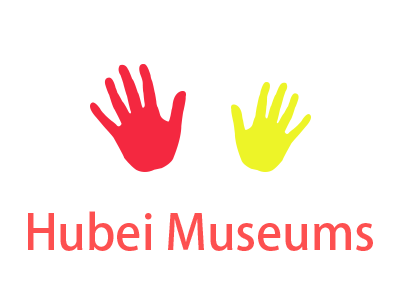
<style>
.page{position:relative;width:400px;height:290px;background:#ffffff}
.page>*{position:absolute;margin:0}
.t1{font:48px "AdobeHeitiStd-Regular";color:#fd5050}
</style>
<div class="page">
<p class="t1" style="left:28px;top:211px;width:345px;height:40px">Hubei Museums</p>
</div>
